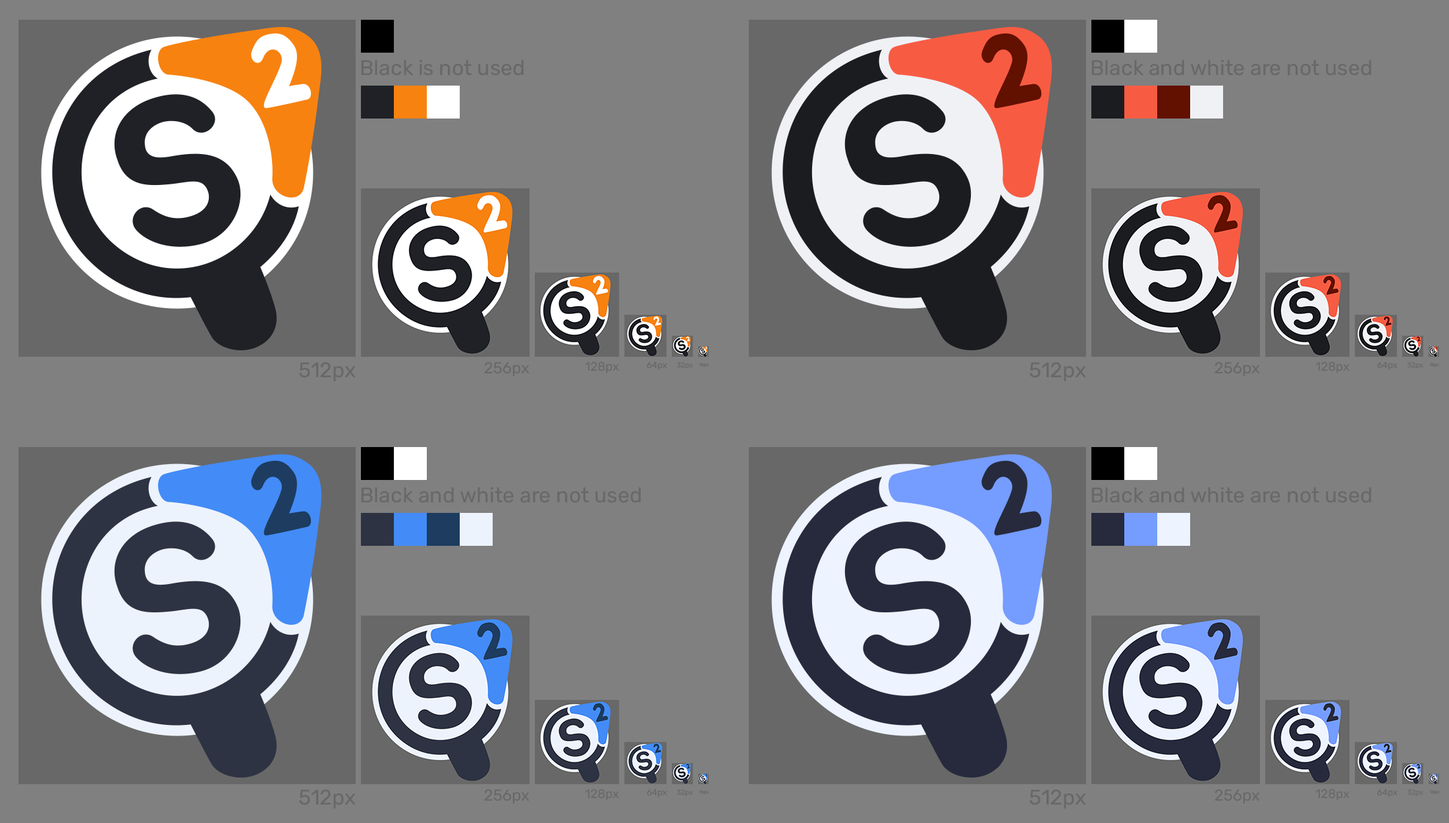
<style>
.page{position:relative;width:1449px;height:823px;background:#808080}
.page>*{position:absolute;margin:0}
.t1{font:21.1px "Rubik-Regular";color:#686868}
.t2{font:15.8px "Rubik-Regular";color:#686868}
.t3{font:12.3px "Rubik-Regular";color:#686868}
.t4{font:8.8px "Rubik-Regular";color:#686868}
.t5{font:7px "Rubik-Regular";color:#686868}
.t6{font:4.4px "Rubik-Regular";color:#686868}
</style>
<div class="page">
<p class="t1" style="left:1091px;top:487px;width:280px;height:16px">Black and white are not used</p>
<p class="t1" style="left:1029px;top:790px;width:57px;height:19px">512px</p>
<p class="t2" style="left:1214px;top:790px;width:46px;height:14px">256px</p>
<p class="t3" style="left:1315px;top:789px;width:34px;height:12px">128px</p>
<p class="t4" style="left:1377px;top:789px;width:20px;height:8px">64px</p>
<p class="t5" style="left:1407px;top:790px;width:16px;height:7px">32px</p>
<p class="t6" style="left:1429px;top:790px;width:10px;height:5px">16px</p>
</div>
